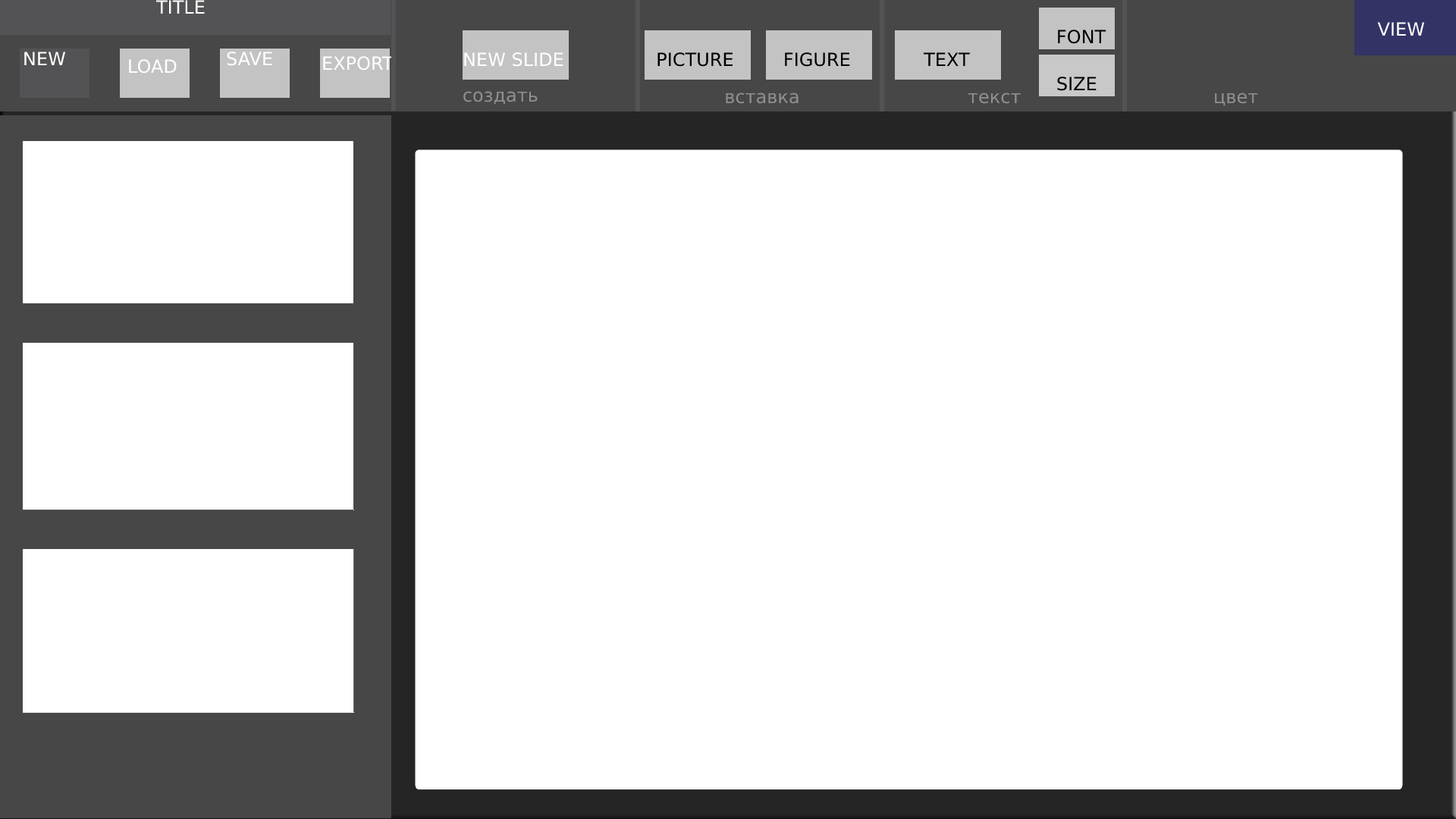
<style>
.page{position:relative;width:1456px;height:819px;background:#ffffff}
.page>*{position:absolute;margin:0}
.t1{font:18.2px "DejaVuSans";color:#ffffff}
.t2{font:18.2px "DejaVuSans";color:#000000}
.t3{font:18.2px "DejaVuSans";color:#909090}
</style>
<div class="page">
<p class="t1" style="left:155px;top:0px;width:50px;height:14px">TITLE</p>
<p class="t2" style="left:1058px;top:30px;width:48px;height:14px">FONT</p>
<p class="t1" style="left:1377px;top:22px;width:48px;height:14px">VIEW</p>
<p class="t1" style="left:24px;top:52px;width:42px;height:13px">NEW</p>
<p class="t1" style="left:227px;top:52px;width:45px;height:14px">SAVE</p>
<p class="t1" style="left:464px;top:52px;width:99px;height:15px">NEW SLIDE</p>
<p class="t2" style="left:657px;top:52px;width:76px;height:15px">PICTURE</p>
<p class="t2" style="left:785px;top:52px;width:65px;height:15px">FIGURE</p>
<p class="t2" style="left:924px;top:52px;width:46px;height:14px">TEXT</p>
<p class="t1" style="left:129px;top:59px;width:48px;height:15px">LOAD</p>
<p class="t2" style="left:1057px;top:77px;width:40px;height:14px">SIZE</p>
<p class="t3" style="left:463px;top:91px;width:75px;height:14px">создать</p>
<p class="t3" style="left:726px;top:93px;width:73px;height:11px">вставка</p>
<p class="t3" style="left:968px;top:93px;width:53px;height:11px">текст</p>
<p class="t3" style="left:1215px;top:93px;width:43px;height:13px">цвет</p>
</div>
